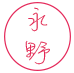
<style>
.page{position:relative;width:74px;height:73px;background:#ffffff}
.page>*{position:absolute;margin:0}
.t1{font:30px/32.6px "MLingWaiMedium-TC";letter-spacing:0.08em;color:#e42859;scale:1.11 1}
</style>
<div class="page">
<p class="t1" style="left:25px;top:7px;width:25px;height:58px;text-align:center">永<br>野</p>
</div>
